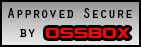
<style>
.page{position:relative;width:141px;height:47px;background:#000000}
.page>*{position:absolute;margin:0}
.t1{font:14px "OratorStd";color:#000000}
.t2{font:19.4px "Counter-StrikeRegular";color:#ff0000}
</style>
<div class="page">
<p class="t1" style="left:8px;top:8px;width:124px;height:10px">Approved Secure</p>
<p class="t1" style="left:20px;top:29px;width:15px;height:8px">by</p>
<p class="t2" style="left:46px;top:28px;width:84px;height:10px">OSSBOX</p>
</div>
